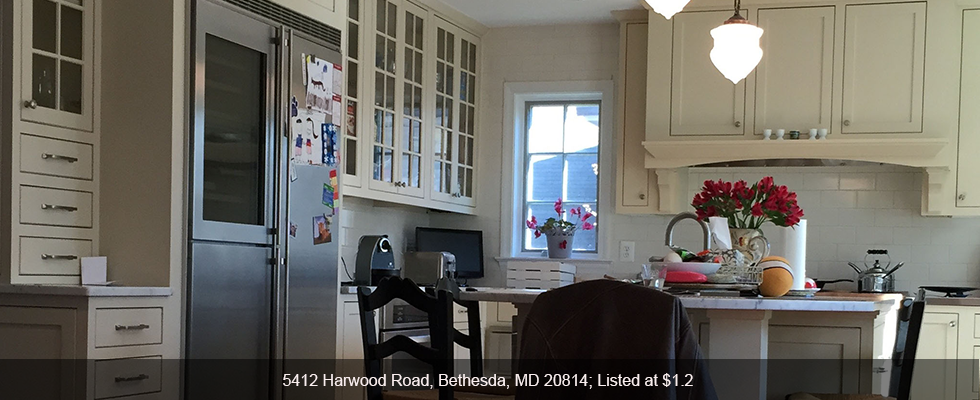
<style>
.page{position:relative;width:980px;height:400px}
.page>*{position:absolute;margin:0}
.t1{font:16px "ArialMT";color:#faefef}
</style>
<div class="page">
<p class="t1" style="left:283px;top:373px;width:410px;height:16px">5412 Harwood Road, Bethesda, MD 20814; Listed at $1.2</p>
</div>
